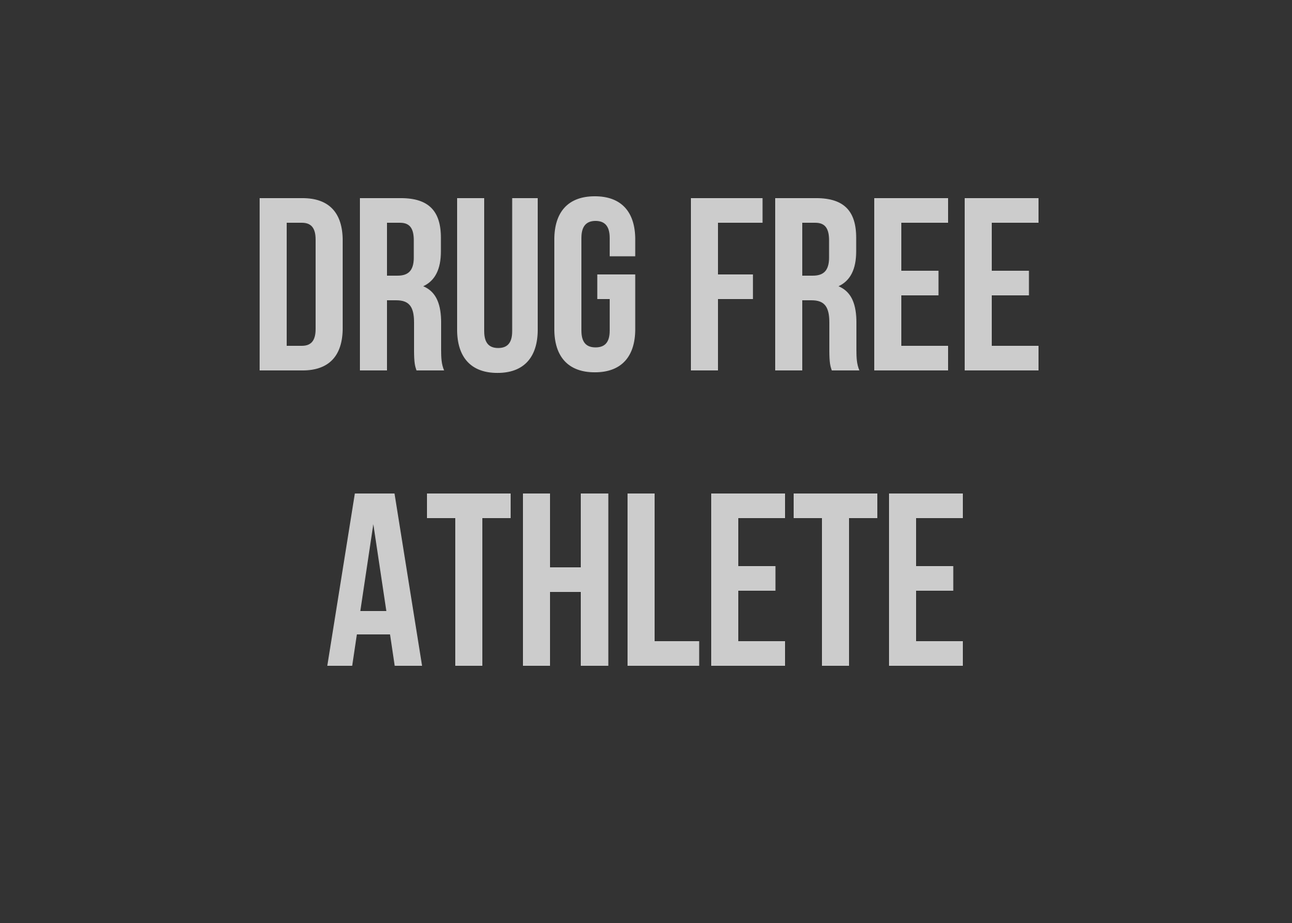
<style>
.page{position:relative;width:1292px;height:923px;background:#333333}
.page>*{position:absolute;margin:0}
.t1{font:246.1px "BebasNeueBold";color:#cccccc}
</style>
<div class="page">
<p class="t1" style="left:260px;top:196px;width:779px;height:470px;text-align:center">Drug Free<br>Athlete</p>
</div>
